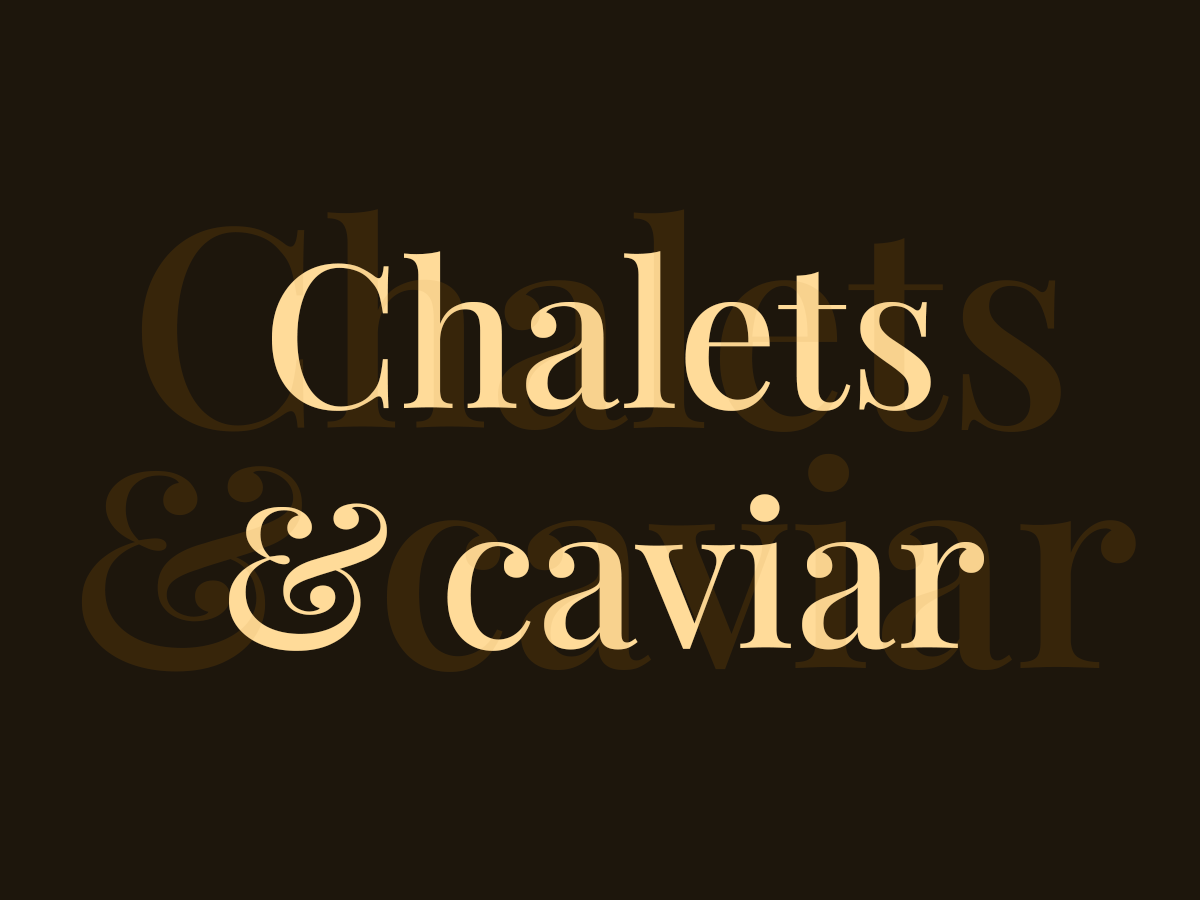
<style>
.page{position:relative;width:1200px;height:900px;background:#1d160c}
.page>*{position:absolute;margin:0}
.t1{font:200px "PlayfairDisplay-Medium";color:#ffdb99}
</style>
<div class="page">
<p class="t1" style="left:229px;top:251px;width:755px;height:400px;text-align:center">Chalets<br>&amp; caviar</p>
</div>
